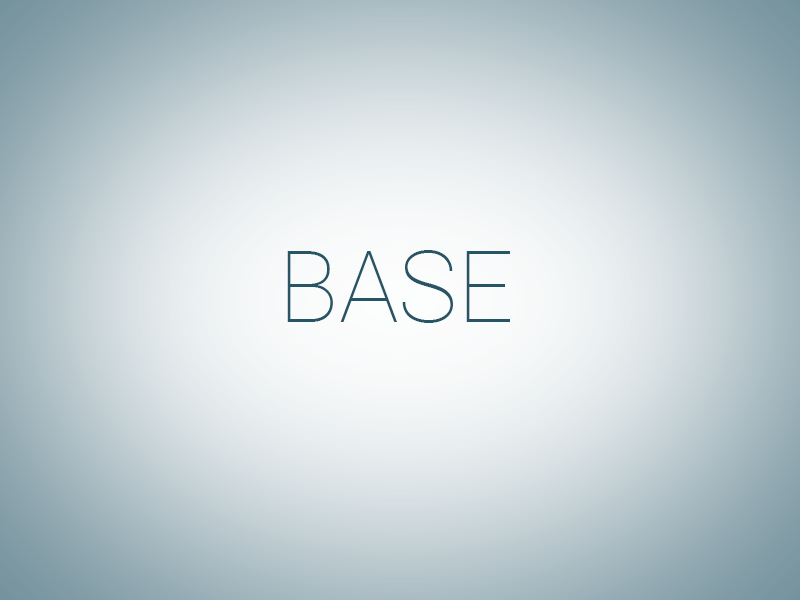
<style>
.page{position:relative;width:800px;height:600px}
.page>*{position:absolute;margin:0}
.t1{font:100px "Roboto-Thin";color:#275566;text-transform:uppercase}
</style>
<div class="page">
<p class="t1" style="left:287px;top:250px;width:223px;height:73px">base</p>
</div>
